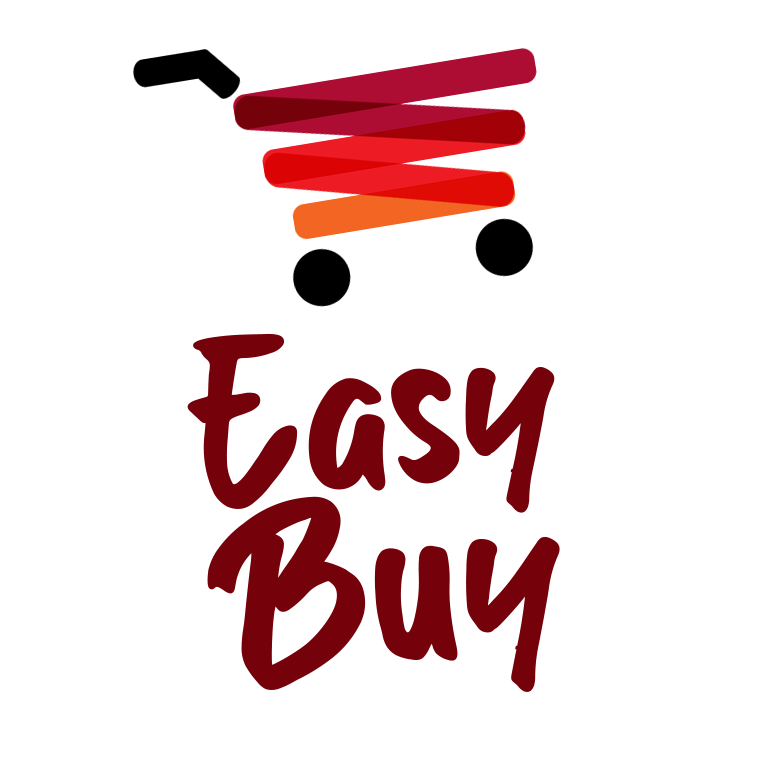
<style>
.page{position:relative;width:768px;height:768px;background:#ffffff}
.page>*{position:absolute;margin:0}
.t1{font:214.9px "IndonesiaMerdeka";color:#75010a;font-weight:bold}
.t2{font:228.7px "IndonesiaMerdeka";color:#75010a;font-weight:bold}
</style>
<div class="page">
<p class="t1" style="left:187px;top:333px;width:368px;height:180px;rotate:-5deg">Easy</p>
<p class="t2" style="left:207px;top:496px;width:353px;height:196px;rotate:-6deg">Buy</p>
</div>
